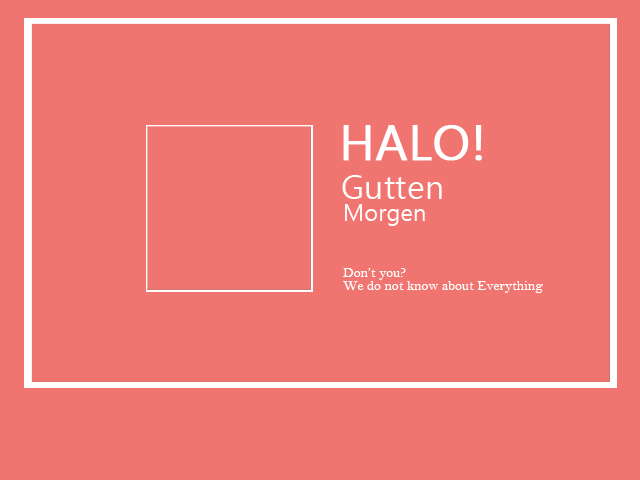
<style>
.page{position:relative;width:640px;height:480px;background:#f07571}
.page>*{position:absolute;margin:0}
.t1{font:48px "MalgunGothicRegular";color:#ffffff;font-weight:bold}
.t2{font:33.5px "MalgunGothicRegular";color:#ffffff}
.t3{font:23.3px "MalgunGothicRegular";color:#ffffff}
.t4{font:14px "BellMT";color:#ffffff}
</style>
<div class="page">
<p class="t1" style="left:343px;top:125px;width:139px;height:36px">HALO!</p>
<p class="t2" style="left:342px;top:175px;width:100px;height:24px">Gutten</p>
<p class="t3" style="left:345px;top:204px;width:80px;height:22px">Morgen</p>
<p class="t4" style="left:343px;top:268px;width:63px;height:12px">Don’t you?</p>
<p class="t4" style="left:343px;top:281px;width:200px;height:12px">We do not know about Everything</p>
</div>
